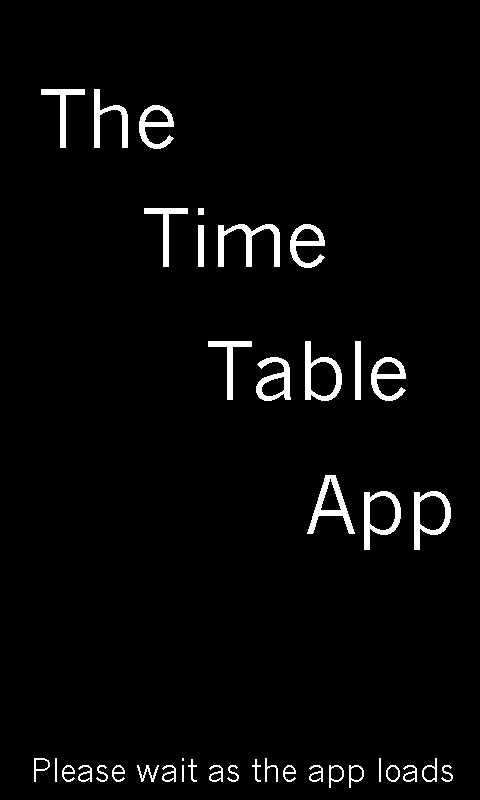
<style>
.page{position:relative;width:480px;height:800px;background:#000000}
.page>*{position:absolute;margin:0}
.t1{font:80px "NewsGothic";color:#ffffff}
.t2{font:32px "NewsGothic";color:#ffffff}
</style>
<div class="page">
<p class="t1" style="left:41px;top:89px;width:133px;height:60px">The</p>
<p class="t1" style="left:144px;top:208px;width:181px;height:60px">Time</p>
<p class="t1" style="left:208px;top:341px;width:198px;height:60px">Table</p>
<p class="t1" style="left:307px;top:475px;width:144px;height:75px">App</p>
<p class="t2" style="left:34px;top:758px;width:419px;height:30px">Please wait as the app loads</p>
</div>
